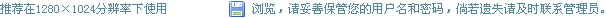
<style>
.page{position:relative;width:606px;height:18px;background:#ffffff}
.page>*{position:absolute;margin:0}
.t1{font:12px "NSimSun";color:#55879a}
</style>
<div class="page">
<p class="t1" style="left:0px;top:3px;width:604px;height:11px">推荐在1280×1024分辨率下使用              浏览，请妥善保管您的用户名和密码，倘若遗失请及时联系管理员。</p>
</div>
